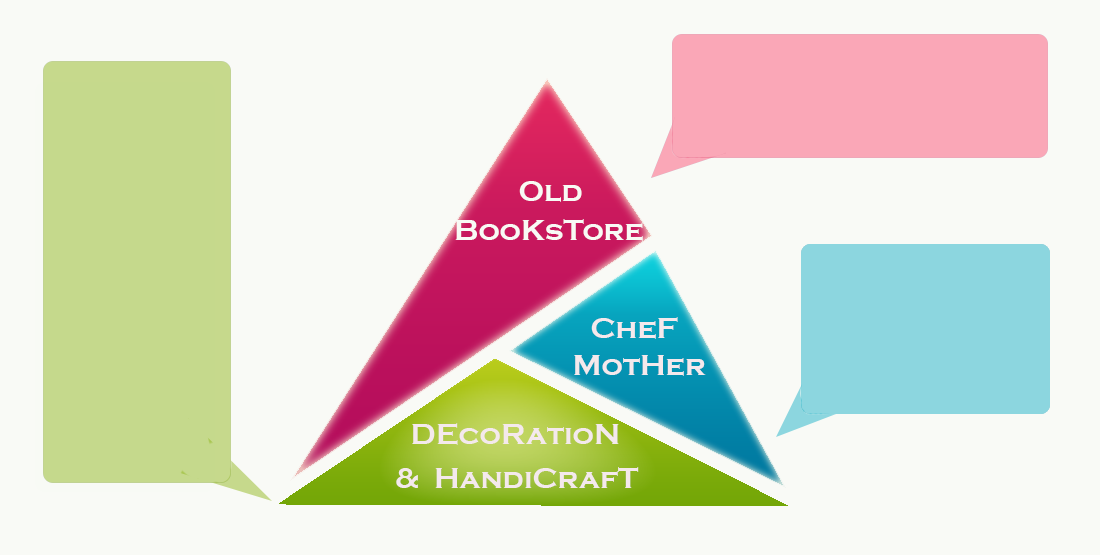
<style>
.page{position:relative;width:1100px;height:555px;background:#f9faf6}
.page>*{position:absolute;margin:0}
.t1{font:30px "CopperplateGothic-Bold";color:#f8faf5}
.t2{font:30px "CopperplateGothic-Bold";color:#f4e9ec}
</style>
<div class="page">
<p class="t1" style="left:519px;top:181px;width:63px;height:21px">Old</p>
<p class="t1" style="left:455px;top:219px;width:188px;height:22px">BooKsTore</p>
<p class="t2" style="left:591px;top:317px;width:87px;height:22px">CheF</p>
<p class="t2" style="left:574px;top:355px;width:132px;height:21px">MotHer</p>
<p class="t2" style="left:412px;top:423px;width:207px;height:22px">DEcoRatioN</p>
<p class="t2" style="left:396px;top:467px;width:243px;height:21px">&amp;  HandiCrafT</p>
</div>
